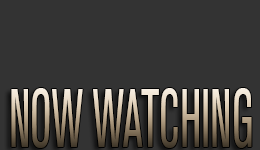
<style>
.page{position:relative;width:260px;height:150px;background:#333333}
.page>*{position:absolute;margin:0}
.t1{font:81.6px "AeonSettings-Regular";scale:0.6 1}
</style>
<div class="page">
<p class="t1" style="left:11px;top:88px;width:241px;height:60px">NOW WATCHING</p>
</div>
